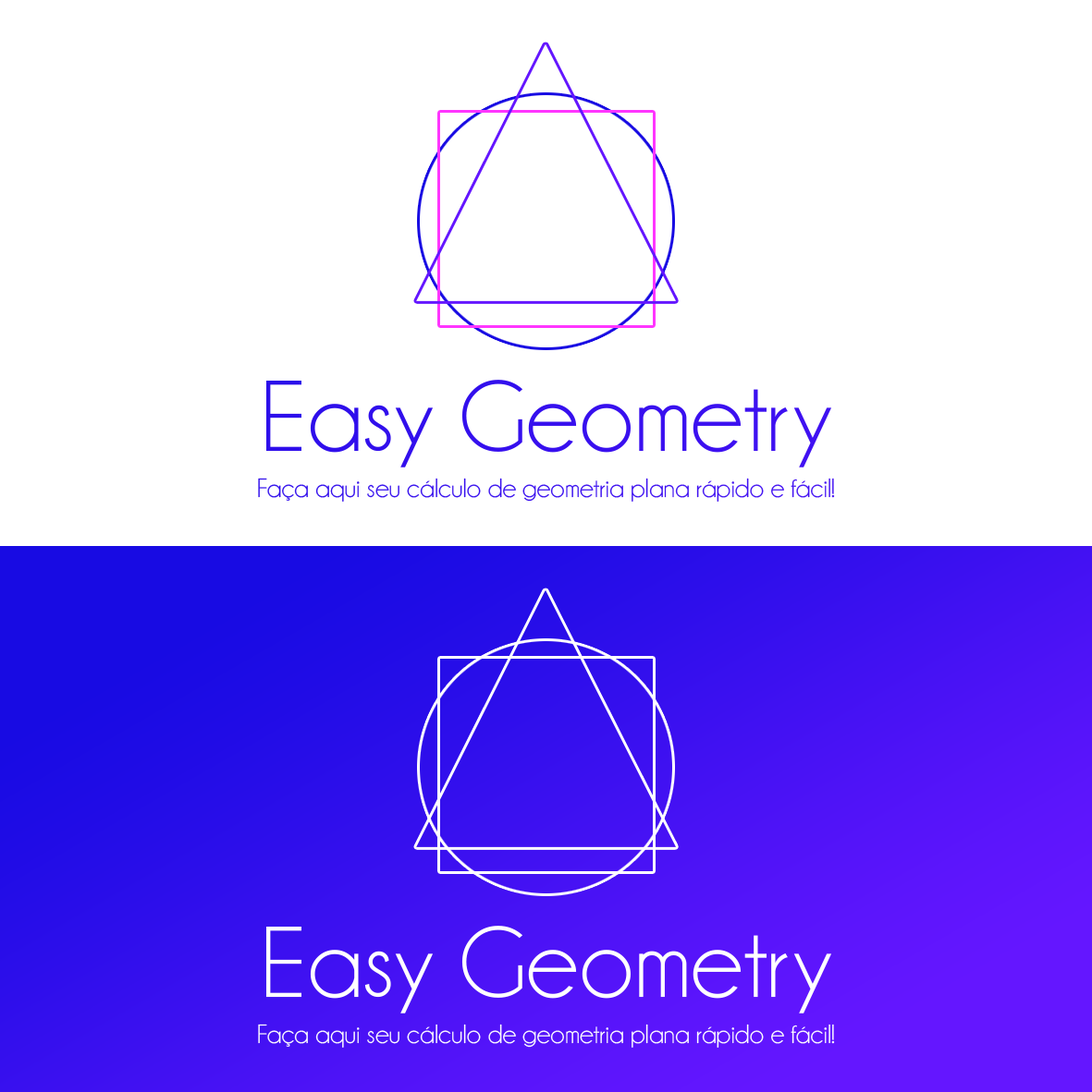
<style>
.page{position:relative;width:1092px;height:1092px;background:#ffffff}
.page>*{position:absolute;margin:0}
.t1{font:102px "Champagne&Limousines";color:#360fee}
.t2{font:26.7px "Champagne&Limousines";color:#3a10f0}
.t3{font:102px "Champagne&Limousines";color:#ffffff}
.t4{font:26.7px "Champagne&Limousines";color:#ffffff}
</style>
<div class="page">
<p class="t1" style="left:266px;top:380px;width:566px;height:88px">Easy Geometry</p>
<p class="t2" style="left:258px;top:478px;width:577px;height:24px">Faça aqui seu cálculo de geometria plana rápido e fácil!</p>
<p class="t3" style="left:266px;top:926px;width:566px;height:88px">Easy Geometry</p>
<p class="t4" style="left:258px;top:1024px;width:577px;height:24px">Faça aqui seu cálculo de geometria plana rápido e fácil!</p>
</div>
